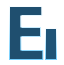
<style>
.page{position:relative;width:64px;height:65px;background:#ffffff}
.page>*{position:absolute;margin:0}
.t1{font:80px "MyriadPro-Bold";color:#1f4f6f}
</style>
<div class="page">
<p class="t1" style="left:9px;top:6px;width:35px;height:54px">E</p>
</div>
